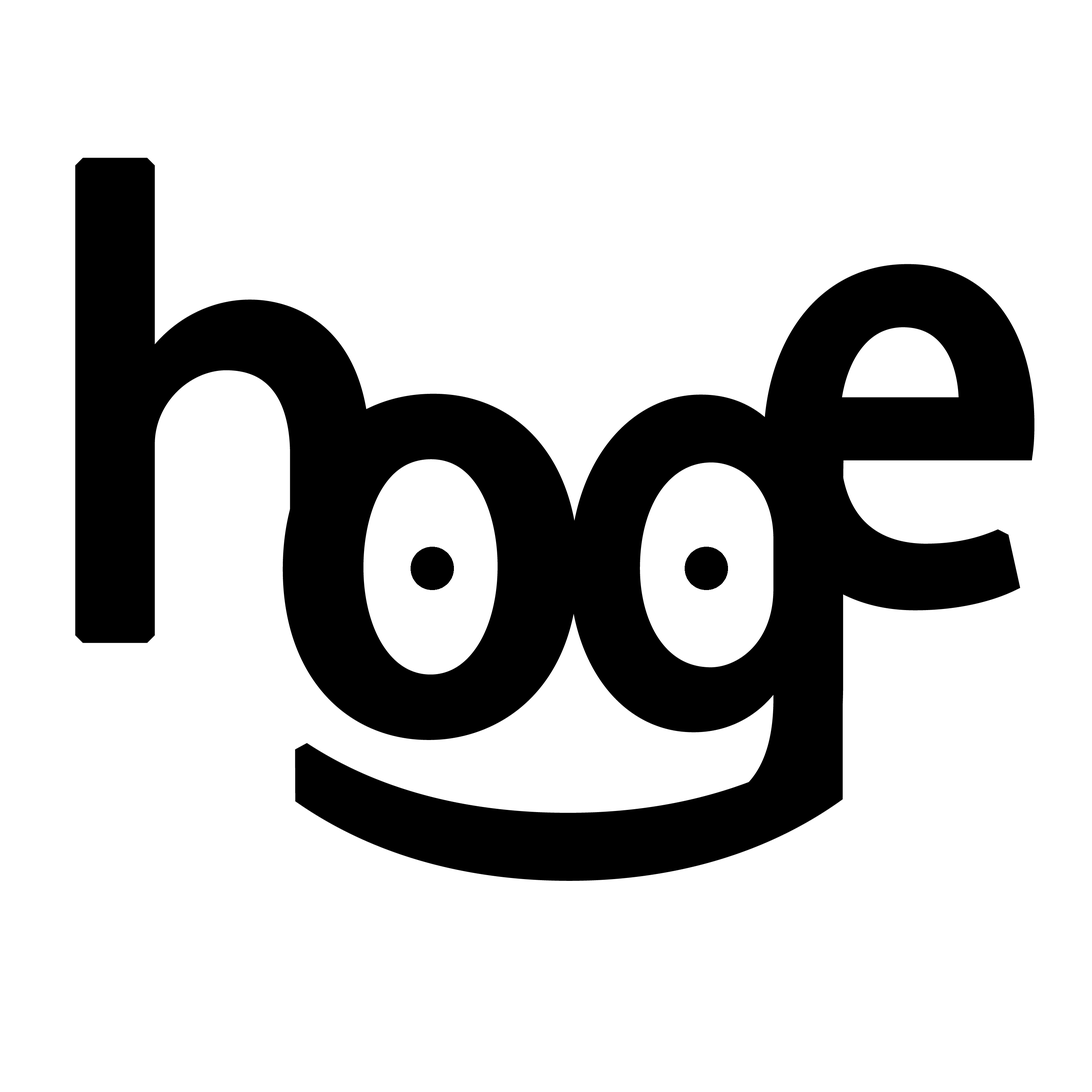
<style>
.page{position:relative;width:1092px;height:1092px;background:#ffffff}
.page>*{position:absolute;margin:0}
.t1{font:576.5px "KozGoPro-Medium";letter-spacing:-0.145em;color:#000000;font-weight:bold;scale:0.95 1}
.t2{font:576.5px "KozGoPro-Medium";letter-spacing:-0.145em;color:#000000;font-weight:bold;scale:0.82 1}
</style>
<div class="page">
<p class="t1" style="left:75px;top:158px;width:295px;height:485px">ｈ</p>
<p class="t1" style="left:764px;top:264px;width:270px;height:346px">e</p>
<p class="t1" style="left:282px;top:393px;width:296px;height:347px">o</p>
<p class="t2" style="left:570px;top:395px;width:276px;height:476px">ｇ</p>
<p class="t1" style="left:295px;top:741px;width:548px;height:140px;rotate:-90deg">(</p>
</div>
